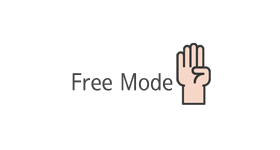
<style>
.page{position:relative;width:280px;height:150px;background:#ffffff}
.page>*{position:absolute;margin:0}
.t1{font:24px "SeN-CM";color:#464545}
</style>
<div class="page">
<p class="t1" style="left:72px;top:73px;width:101px;height:18px">Free Mode</p>
</div>
